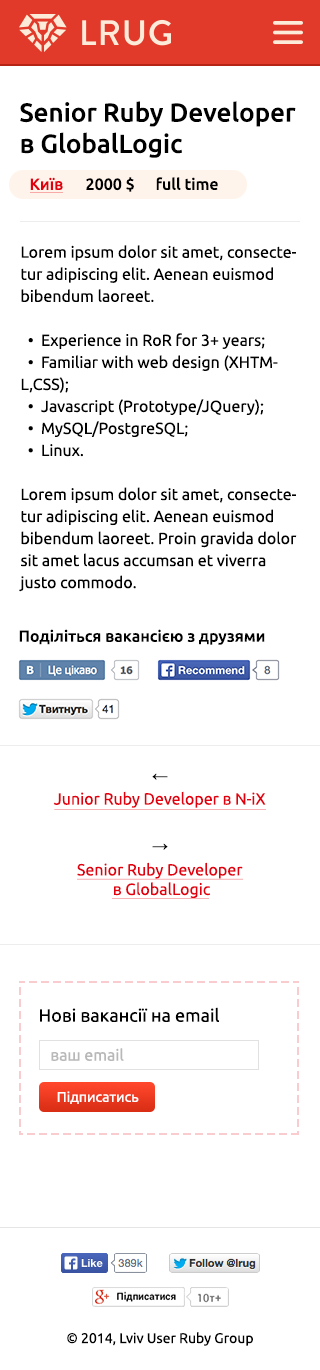
<style>
.page{position:relative;width:320px;height:1370px;background:#ffffff}
.page>*{position:absolute;margin:0}
.t1{font:26px "Ubuntu-Medium";color:#000000}
.t2{font:16px "Ubuntu-Medium";color:#e3000e}
.t3{font:16px "Ubuntu-Medium";color:#000000}
.t4{font:16px/22px "Ubuntu";color:#000000}
.t5{font:16px "ArialMT";color:#000000}
.t6{font:16.4px "Ubuntu";color:#e3000e}
.t7{font:16.2px "Ubuntu";color:#e3000e}
.t8{font:18px "Ubuntu";color:#000000}
.t9{font:16px "Ubuntu";color:#b8b8b8}
.t10{font:14px "Ubuntu";color:#ffffff}
.t11{font:14px "Ubuntu";color:#000000}
</style>
<div class="page">
<p class="t1" style="left:20px;top:101px;width:276px;height:57px">Senior Ruby Developer <br>в GlobalLogic</p>
<p class="t2" style="left:30px;top:177px;width:33px;height:13px">Київ</p>
<p class="t3" style="left:86px;top:177px;width:48px;height:15px">2000 $</p>
<p class="t3" style="left:156px;top:177px;width:62px;height:13px">full time</p>
<p class="t4" style="left:19px;top:245px;width:278px;height:347px">Lorem ipsum dolor sit amet, consectetur adipiscing elit. Aenean euismod bibendum laoreet. <br><br>  •  Experience in RoR for 3+ years;<br>  •  Familiar with web design (XHTML,CSS);<br>  •  Javascript (Prototype/JQuery);<br>  •  MySQL/PostgreSQL;<br>  •  Linux.<br><br>Lorem ipsum dolor sit amet, consectetur adipiscing elit. Aenean euismod bibendum laoreet. Proin gravida dolor sit amet lacus accumsan et viverra justo commodo.</p>
<p class="t3" style="left:19px;top:629px;width:246px;height:16px">Поділіться вакансією з друзями</p>
<p class="t5" style="left:152px;top:773px;width:16px;height:7px">←</p>
<p class="t6" style="left:53px;top:791px;width:213px;height:17px">Junior Ruby Developer в N-iX</p>
<p class="t5" style="left:152px;top:843px;width:16px;height:7px">→</p>
<p class="t7" style="left:77px;top:862px;width:166px;height:36px;text-align:center">Senior Ruby Developer <br>в GlobalLogic</p>
<p class="t8" style="left:40px;top:1007px;width:179px;height:15px">Нові вакансії на email</p>
<p class="t9" style="left:51px;top:1048px;width:73px;height:13px">ваш email</p>
<p class="t10" style="left:57px;top:1091px;width:82px;height:13px">Підписатись</p>
<p class="t11" style="left:67px;top:1332px;width:186px;height:14px">© 2014, Lviv User Ruby Group</p>
</div>
